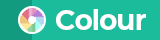
<style>
.page{position:relative;width:160px;height:40px;background:#1abc9c}
.page>*{position:absolute;margin:0}
.t1{font:28px "Montserrat-Bold";letter-spacing:-0.025em;color:#ffffff}
</style>
<div class="page">
<p class="t1" style="left:56px;top:9px;width:90px;height:21px">Colour</p>
</div>
